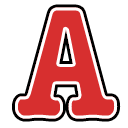
<style>
.page{position:relative;width:128px;height:128px;background:#ffffff}
.page>*{position:absolute;margin:0}
.t1{font:164.8px "AmericanTypewriter-CondensedBold";color:#d72f2f}
</style>
<div class="page">
<p class="t1" style="left:15px;top:7px;width:103px;height:112px">A</p>
<p class="t1" style="left:15px;top:7px;width:103px;height:112px">A</p>
</div>
